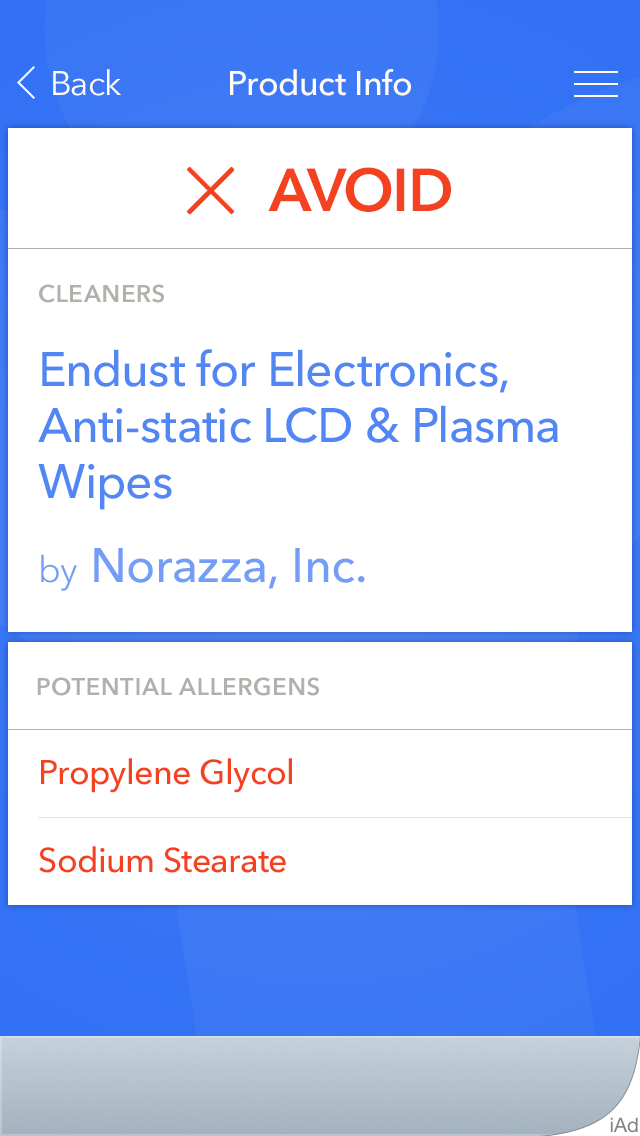
<style>
.page{position:relative;width:640px;height:1136px;background:#ffffff}
.page>*{position:absolute;margin:0}
.t1{font:34px "AvenirNext-Regular";letter-spacing:-0.01em;color:#fffbf5}
.t2{font:34px "AvenirNext-Medium";letter-spacing:-0.01em;color:#fffbf5}
.t3{font:60px "AvenirNext-DemiBold";letter-spacing:-0.01em;color:#f44220;text-transform:uppercase}
.t4{font:24px "AvenirNext-DemiBold";letter-spacing:0.025em;color:#b3b0ab;text-transform:uppercase}
.t5{font:48px/56px "AvenirNext-Medium";letter-spacing:-0.01em;color:#5186f4}
.t6{font:48px "AvenirNext-Medium";color:#749ef6}
.t7{font:36px "AvenirNext-Regular";color:#749ef6}
.t8{font:34px/88px "AvenirNext-Medium";letter-spacing:-0.01em;color:#f44220}
</style>
<div class="page">
<p class="t1" style="left:53px;top:69px;width:68px;height:27px">Back</p>
<p class="t2" style="left:230px;top:69px;width:181px;height:27px">Product Info</p>
<p class="t3" style="left:268px;top:167px;width:183px;height:45px">Avoid</p>
<p class="t4" style="left:39px;top:284px;width:125px;height:19px">Cleaners</p>
<p class="t5" style="left:38px;top:349px;width:520px;height:161px">Endust for Electronics, Anti-static LCD &amp; Plasma Wipes</p>
<p class="t6" style="left:41px;top:548px;width:324px;height:43px"><span class="t7">by </span>Norazza, Inc.</p>
<p class="t4" style="left:37px;top:677px;width:282px;height:19px">Potential Allergens</p>
<p class="t8" style="left:39px;top:758px;width:253px;height:115px">Propylene Glycol<br>Sodium Stearate</p>
</div>
